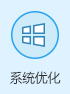
<style>
.page{position:relative;width:70px;height:94px;background:#def2ff}
.page>*{position:absolute;margin:0}
.t1{font:13px "MicrosoftYaHei";color:#323232}
</style>
<div class="page">
<p class="t1" style="left:10px;top:71px;width:51px;height:13px">系统优化</p>
</div>
